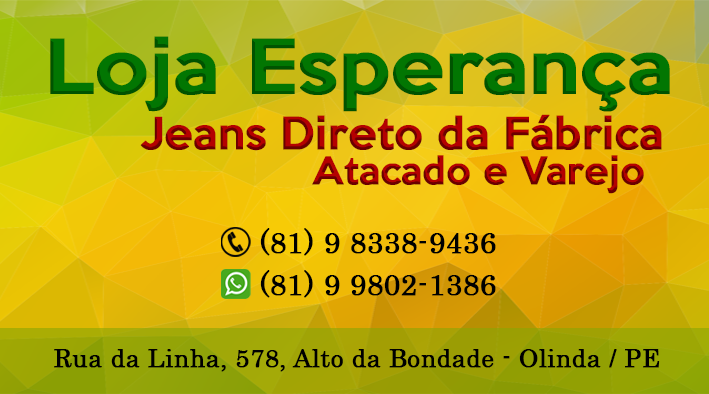
<style>
.page{position:relative;width:709px;height:394px}
.page>*{position:absolute;margin:0}
.t1{font:68.4px "KeepCalm-Medium";color:#056305;font-weight:bold;scale:1.12 1}
.t2{font:40.5px "KeepCalm-Medium";font-weight:bold}
.t3{font:34.8px "KeepCalm-Medium";font-weight:bold}
.t4{font:29.3px "Century";color:#000000;font-weight:bold}
.t5{font:25px "Century";color:#000000;font-weight:bold}
</style>
<div class="page">
<p class="t1" style="left:50px;top:36px;width:620px;height:76px">Loja Esperança</p>
<p class="t2" style="left:140px;top:114px;width:522px;height:37px">Jeans Direto da Fábrica</p>
<p class="t3" style="left:312px;top:155px;width:332px;height:39px">Atacado e Varejo</p>
<p class="t4" style="left:260px;top:228px;width:236px;height:28px">(81) 9 8338-9436</p>
<p class="t4" style="left:260px;top:270px;width:236px;height:28px">(81) 9 9802-1386</p>
<p class="t5" style="left:54px;top:349px;width:606px;height:23px">Rua da Linha, 578, Alto da Bondade - Olinda / PE</p>
</div>
